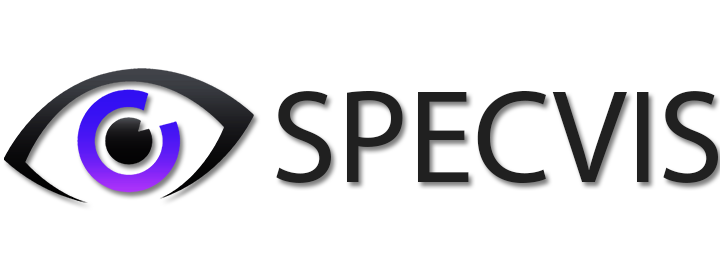
<style>
.page{position:relative;width:720px;height:270px;background:#ffffff}
.page>*{position:absolute;margin:0}
.t1{font:133.4px "MyriadPro-Regular";color:#202020}
</style>
<div class="page">
<p class="t1" style="left:276px;top:91px;width:442px;height:92px">SPECVIS</p>
</div>
